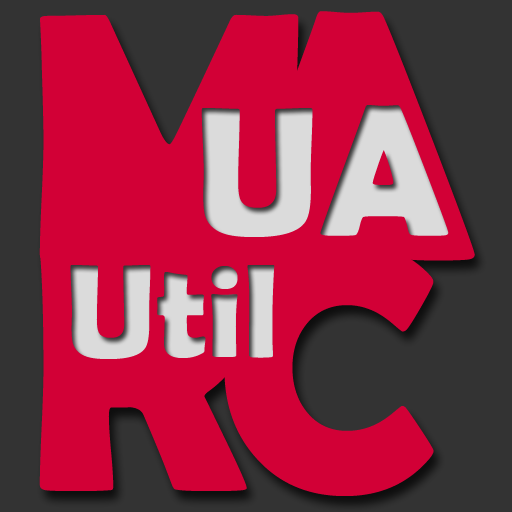
<style>
.page{position:relative;width:512px;height:512px;background:#d20036}
.page>*{position:absolute;margin:0}
.t1{font:355.4px/231px "BerlinSansFBDemi-Bold";color:#d20036}
.t2{font:185.6px "BerlinSansFBDemi-Bold";color:#dbdbdb}
.t3{font:134px "BerlinSansFBDemi-Bold";color:#dbdbdb}
</style>
<div class="page">
<p class="t1" style="left:39px;top:11px;width:436px;height:485px">MA<br>RC</p>
<p class="t2" style="left:201px;top:105px;width:248px;height:132px">UA</p>
<p class="t3" style="left:70px;top:265px;width:205px;height:94px">Util</p>
</div>
